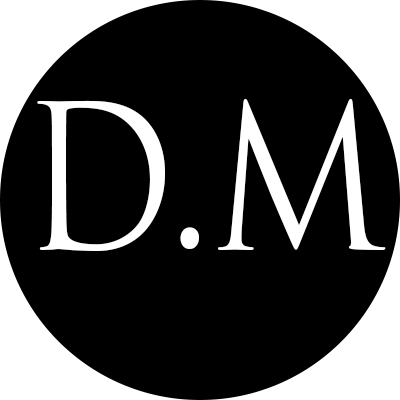
<style>
.page{position:relative;width:400px;height:400px;background:#000000}
.page>*{position:absolute;margin:0}
.t1{font:196.4px "TrajanPro-Regular";color:#ffffff;scale:0.85 1}
</style>
<div class="page">
<p class="t1" style="left:37px;top:99px;width:349px;height:153px">D.M</p>
</div>
